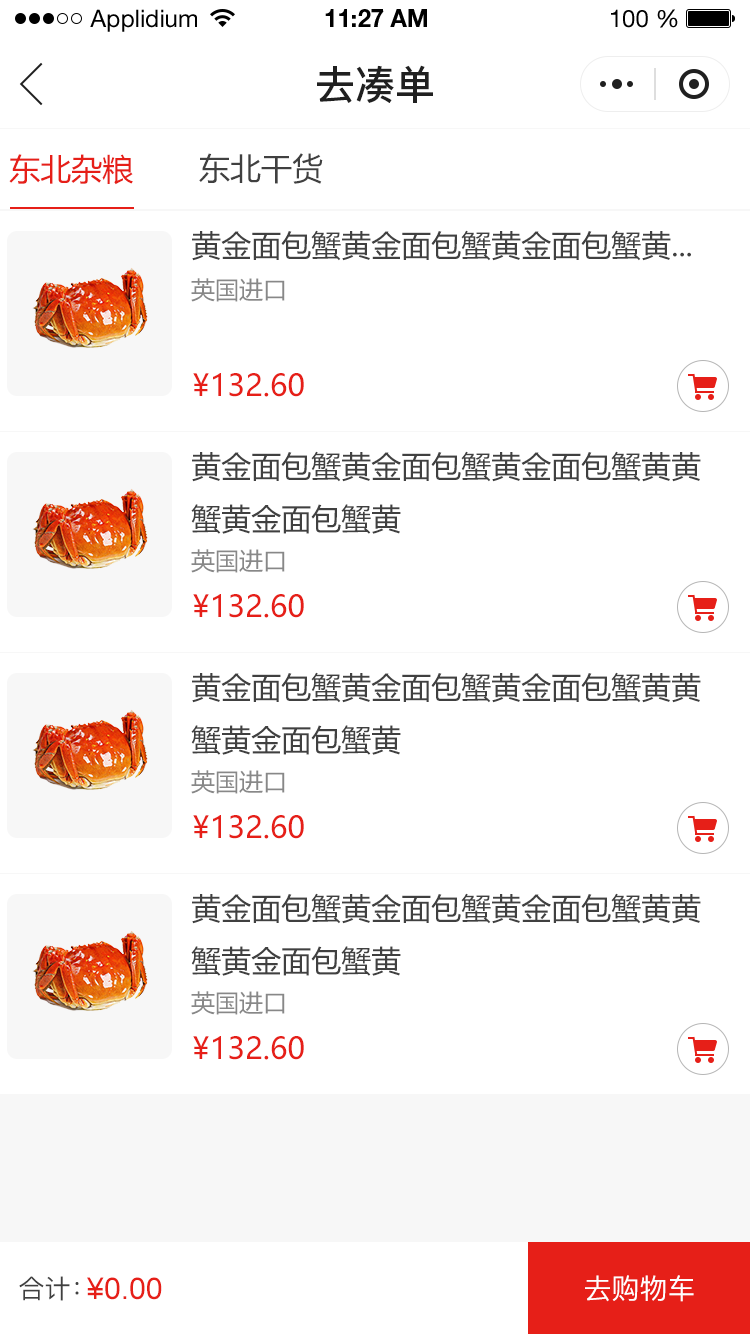
<style>
.page{position:relative;width:750px;height:1334px;background:#ffffff}
.page>*{position:absolute;margin:0}
.t1{font:24px "HelveticaNeueLTStd-Roman";color:#000000}
.t2{font:24px "HelveticaNeueLTStd-Bd";color:#000000}
.t3{font:40px "PingFang-SC-Bold";color:#202020;text-transform:uppercase}
.t4{font:31px "MicrosoftYaHei";color:#e61f18}
.t5{font:31px "MicrosoftYaHei";color:#404040}
.t6{font:30px "MicrosoftYaHei";color:#404040;text-transform:uppercase}
.t7{font:24px "MicrosoftYaHei";color:#888888;text-transform:uppercase}
.t8{font:30px "MicrosoftYaHei";color:#e61f18;text-transform:uppercase}
.t9{font:26px "PingFang-SC-Medium";color:#404040;text-transform:uppercase}
.t10{font:30px "ArialMT";color:#e61f18;text-transform:uppercase}
.t11{font:28px "PingFang-SC-Medium";color:#fffefe;text-transform:uppercase}
</style>
<div class="page">
<p class="t1" style="left:90px;top:9px;width:107px;height:23px">Applidium</p>
<p class="t2" style="left:325px;top:9px;width:102px;height:18px">11:27 AM</p>
<p class="t1" style="left:611px;top:9px;width:67px;height:19px">100 %</p>
<p class="t3" style="left:317px;top:65px;width:116px;height:38px">去凑单</p>
<p class="t4" style="left:9px;top:154px;width:124px;height:31px">东北杂粮</p>
<p class="t5" style="left:199px;top:153px;width:124px;height:31px">东北干货</p>
<p class="t6" style="left:192px;top:230px;width:499px;height:31px">黄金面包蟹黄金面包蟹黄金面包蟹黄...</p>
<p class="t7" style="left:191px;top:278px;width:94px;height:24px">英国进口</p>
<p class="t8" style="left:193px;top:373px;width:111px;height:24px">¥132.60</p>
<p class="t6" style="left:191px;top:451px;width:510px;height:83px">黄金面包蟹黄金面包蟹黄金面包蟹黄黄<br>蟹黄金面包蟹黄</p>
<p class="t7" style="left:191px;top:549px;width:94px;height:24px">英国进口</p>
<p class="t8" style="left:193px;top:594px;width:111px;height:24px">¥132.60</p>
<p class="t6" style="left:191px;top:672px;width:510px;height:83px">黄金面包蟹黄金面包蟹黄金面包蟹黄黄<br>蟹黄金面包蟹黄</p>
<p class="t7" style="left:191px;top:770px;width:94px;height:24px">英国进口</p>
<p class="t8" style="left:193px;top:815px;width:111px;height:24px">¥132.60</p>
<p class="t6" style="left:191px;top:893px;width:510px;height:83px">黄金面包蟹黄金面包蟹黄金面包蟹黄黄<br>蟹黄金面包蟹黄</p>
<p class="t7" style="left:191px;top:991px;width:94px;height:24px">英国进口</p>
<p class="t8" style="left:193px;top:1036px;width:111px;height:24px">¥132.60</p>
<p class="t9" style="left:19px;top:1276px;width:60px;height:25px">合计：</p>
<p class="t10" style="left:87px;top:1277px;width:75px;height:23px">¥0.00</p>
<p class="t11" style="left:585px;top:1275px;width:109px;height:27px">去购物车</p>
</div>
